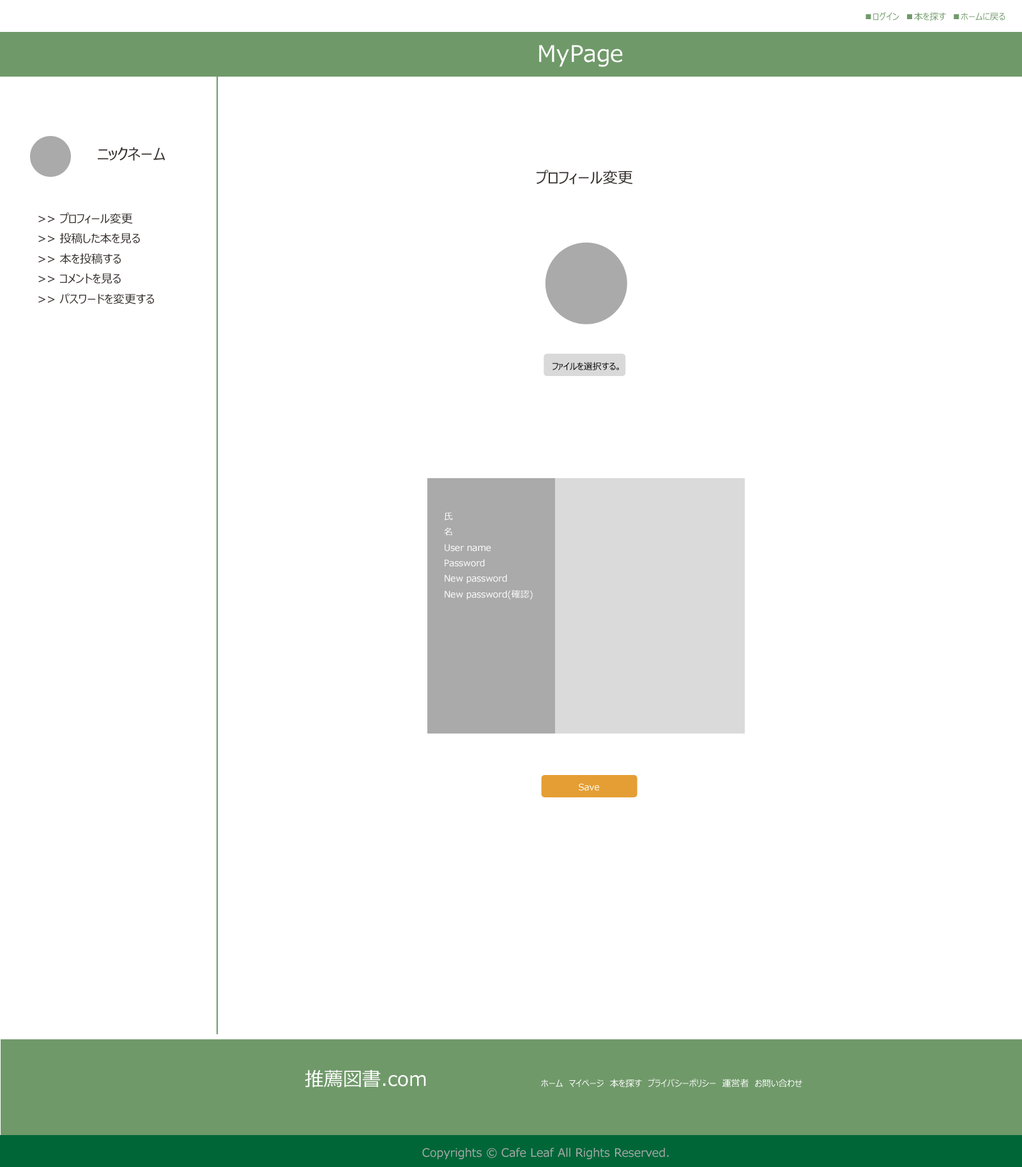
<style>
.page{position:relative;width:1022px;height:1167px;background:#ffffff}
.page>*{position:absolute;margin:0}
.t1{font:8.9px "MeiryoUI";color:#70996a}
.t2{font:22.9px "MeiryoUI";color:#ffffff}
.t3{font:15.3px "MeiryoUI";color:#362f2d}
.t4{font:11.5px "MeiryoUI";color:#362f2d}
.t5{font:8.9px "MeiryoUI";color:#000000}
.t6{font:8.9px "MeiryoUI";color:#ffffff}
.t7{font:19.1px "MeiryoUI";color:#ffffff}
.t8{font:11.5px "MeiryoUI";color:#aaaaaa}
</style>
<div class="page">
<p class="t1" style="left:865px;top:11px;width:140px;height:9px">■ログイン　■本を探す　■ホームに戻る</p>
<p class="t2" style="left:539px;top:45px;width:84px;height:22px">MyPage</p>
<p class="t3" style="left:98px;top:147px;width:67px;height:14px">ニックネーム</p>
<p class="t3" style="left:536px;top:170px;width:97px;height:15px">プロフィール変更</p>
<p class="t4" style="left:38px;top:213px;width:116px;height:92px">&gt;&gt; プロフィール変更<br>&gt;&gt; 投稿した本を見る<br>&gt;&gt; 本を投稿する<br>&gt;&gt; コメントを見る<br>&gt;&gt; パスワードを変更する</p>
<p class="t5" style="left:552px;top:362px;width:67px;height:8px">ファイルを選択する。</p>
<p class="t6" style="left:444px;top:512px;width:89px;height:88px">氏<br>名<br>User name<br>Password<br>New password<br>New password(確認)</p>
<p class="t6" style="left:578px;top:783px;width:21px;height:8px">Save</p>
<p class="t7" style="left:305px;top:1070px;width:121px;height:17px">推薦図書.com</p>
<p class="t6" style="left:541px;top:1078px;width:261px;height:9px">ホーム　マイページ　本を探す　プライバシーポリシー　運営者　お問い合わせ</p>
<p class="t8" style="left:422px;top:1148px;width:247px;height:12px">Copyrights © Cafe Leaf All Rights Reserved.</p>
</div>
